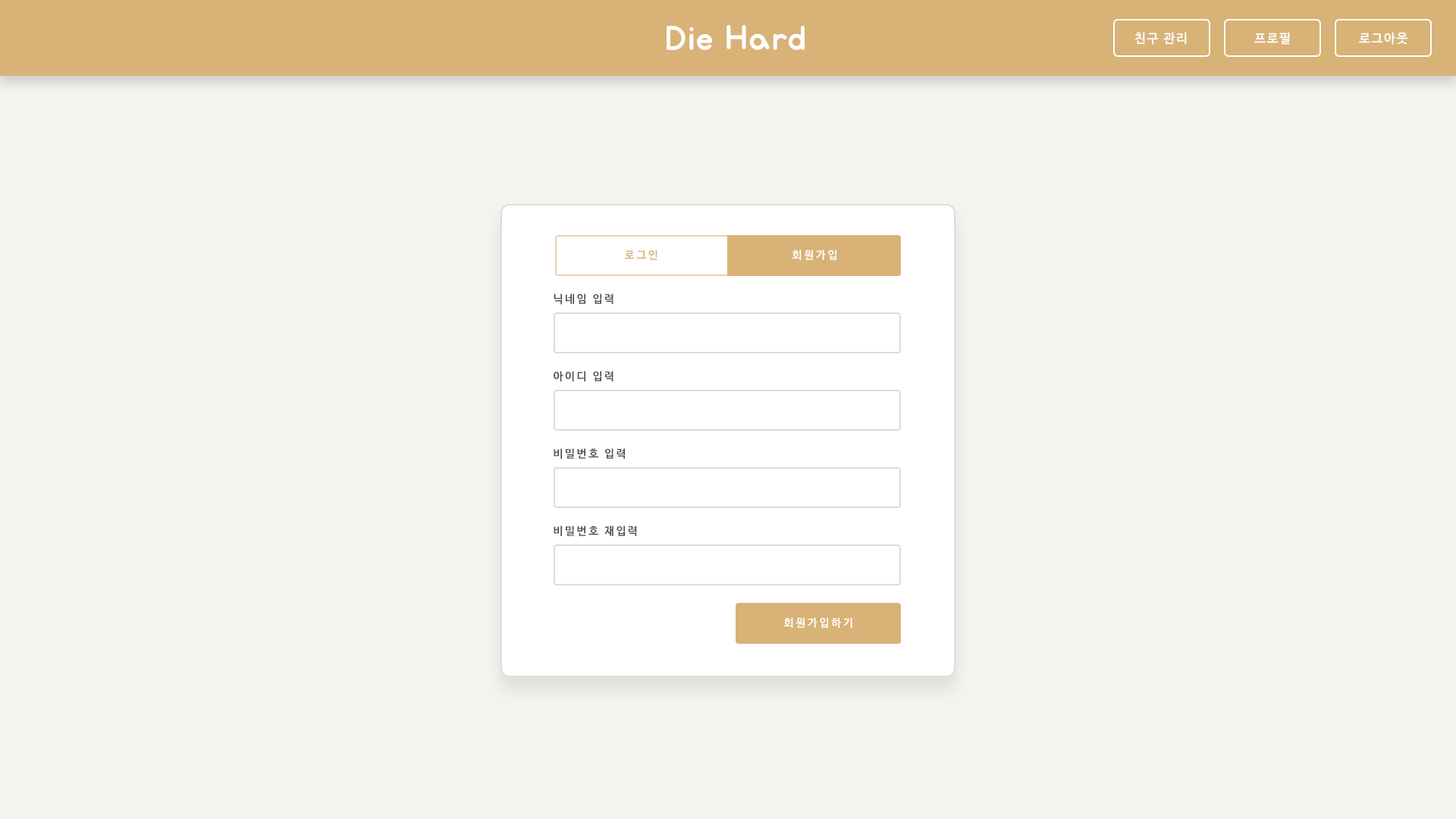
<style>
.page{position:relative;width:1456px;height:819px;background:#f5f3ee}
.page>*{position:absolute;margin:0}
.t1{font:12.6px "NanumBarunGothicBold";letter-spacing:0.1em;color:#fefefe}
.t2{font:12.6px "NanumBarunGothicBold";letter-spacing:0.1em;color:#ffffff}
.t3{font:11px "NanumBarunGothicBold";letter-spacing:0.2em;color:#d8b276}
.t4{font:11px "NanumBarunGothicBold";letter-spacing:0.2em;color:#ffffff}
.t5{font:11.1px "NanumBarunGothicBold";letter-spacing:0.16em;color:#4d4d4d}
</style>
<div class="page">
<p class="t1" style="left:1134px;top:32px;width:53px;height:13px">친구 관리</p>
<p class="t2" style="left:1254px;top:32px;width:36px;height:13px">프로필</p>
<p class="t1" style="left:1359px;top:32px;width:49px;height:13px">로그아웃</p>
<p class="t3" style="left:624px;top:249px;width:33px;height:11px">로그인</p>
<p class="t4" style="left:792px;top:249px;width:44px;height:11px">회원가입</p>
<p class="t5" style="left:554px;top:293px;width:59px;height:12px">닉네임 입력</p>
<p class="t5" style="left:554px;top:371px;width:59px;height:10px">아이디 입력</p>
<p class="t5" style="left:554px;top:448px;width:71px;height:11px">비밀번호 입력</p>
<p class="t5" style="left:554px;top:526px;width:83px;height:10px">비밀번호 재입력</p>
<p class="t4" style="left:783px;top:617px;width:69px;height:11px">회원가입하기</p>
</div>
